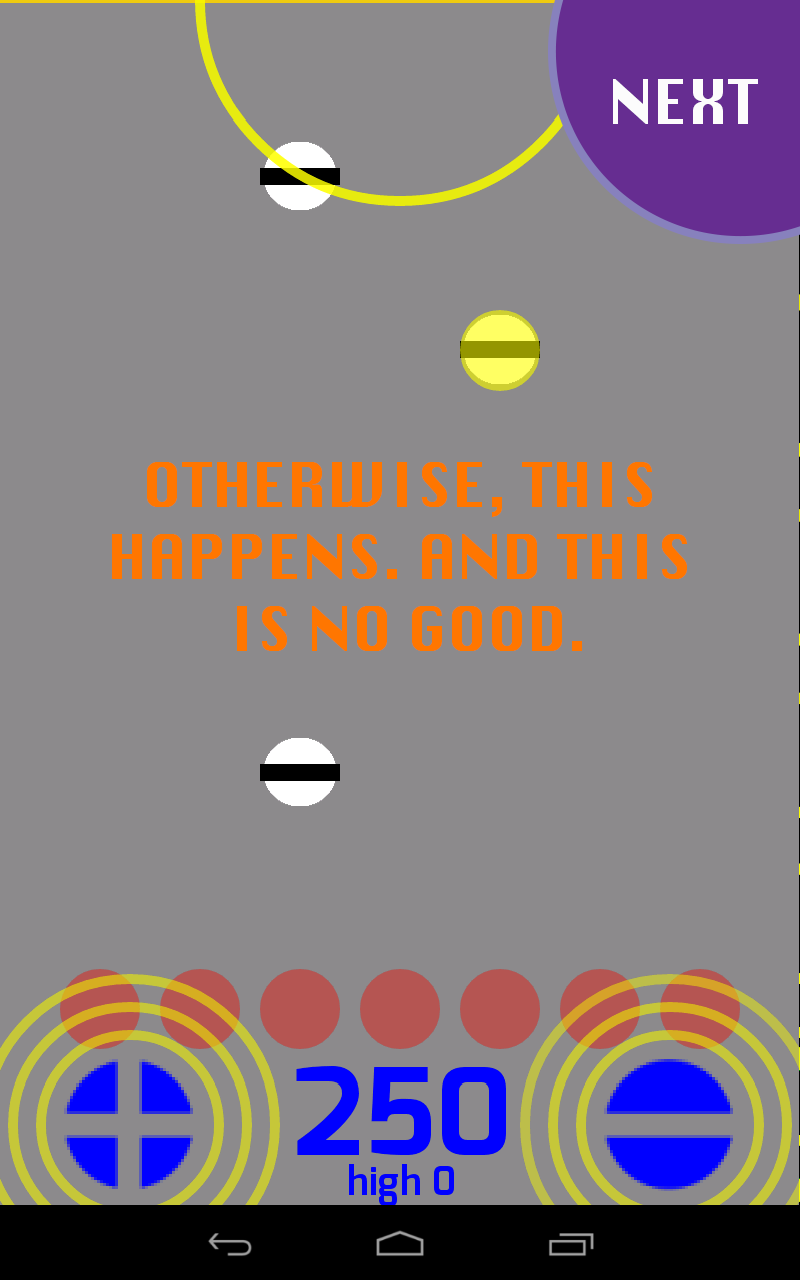
<style>
.page{position:relative;width:800px;height:1280px;background:#8c8a8c}
.page>*{position:absolute;margin:0}
.t1{font:60px "Silom";color:#fcfcfc}
.t2{font:60px "Silom";color:#ff7600}
</style>
<div class="page">
<p class="t1" style="left:613px;top:79px;width:145px;height:45px">NEXT</p>
<p class="t2" style="left:112px;top:462px;width:575px;height:189px;text-align:center">OTHERWISE, THIS <br>HAPPENS. AND THIS <br>IS NO GOOD.</p>
</div>
